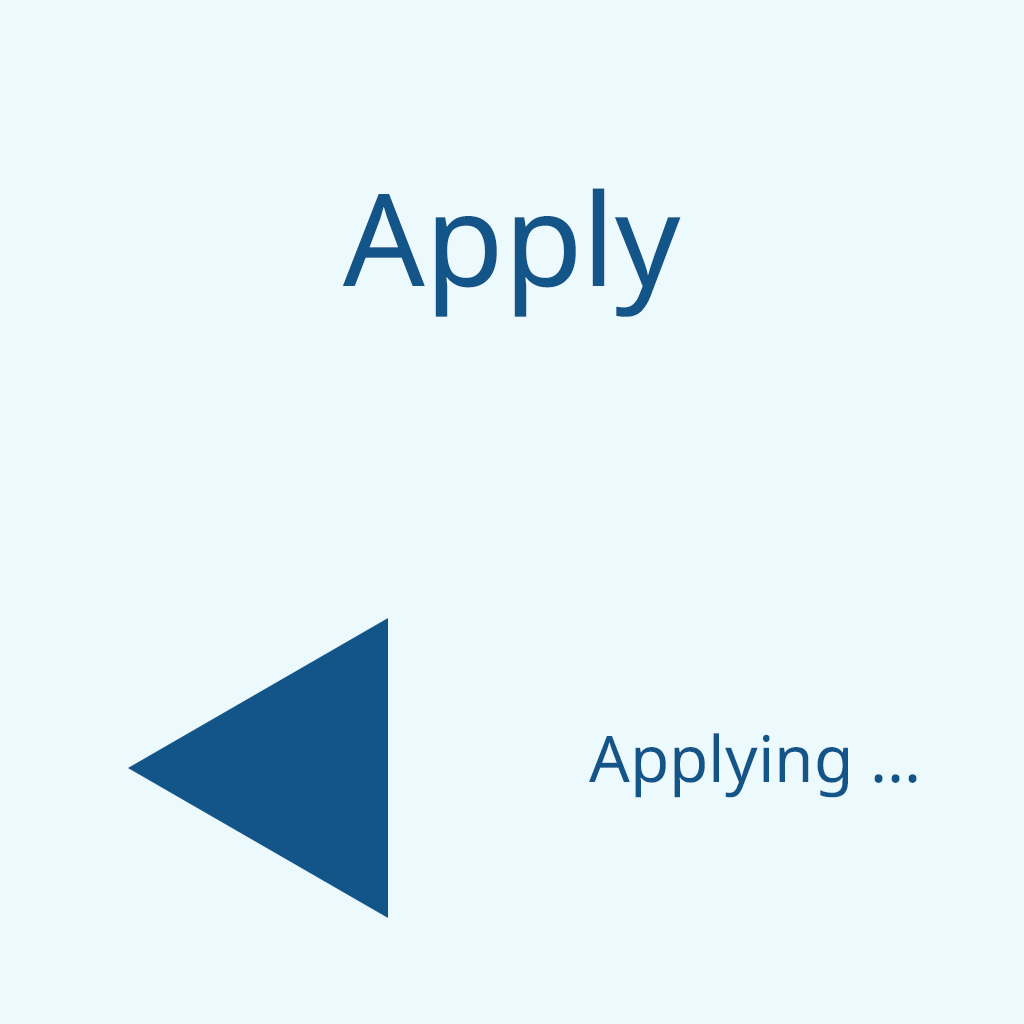
<style>
.page{position:relative;width:1024px;height:1024px;background:#edfafd}
.page>*{position:absolute;margin:0}
.t1{font:128px "NotoSans-Regular";color:#135589}
.t2{font:64px "NotoSans-Regular";color:#135589}
</style>
<div class="page">
<p class="t1" style="left:343px;top:188px;width:338px;height:129px">Apply</p>
<p class="t2" style="left:589px;top:733px;width:328px;height:65px">Applying ...</p>
</div>
